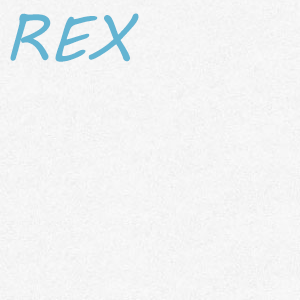
<style>
.page{position:relative;width:300px;height:300px;background:#f5f5f5}
.page>*{position:absolute;margin:0}
.t1{font:63.2px "MVBoli";color:#63b4d2;scale:1.03 1}
</style>
<div class="page">
<p class="t1" style="left:10px;top:13px;width:129px;height:49px">REX</p>
</div>
